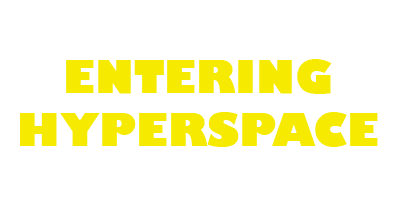
<style>
.page{position:relative;width:400px;height:200px;background:#ffffff}
.page>*{position:absolute;margin:0}
.t1{font:44px "GillSans-UltraBold";color:#f6eb00}
</style>
<div class="page">
<p class="t1" style="left:20px;top:59px;width:358px;height:88px;text-align:center">ENTERING<br>HYPERSPACE</p>
</div>
